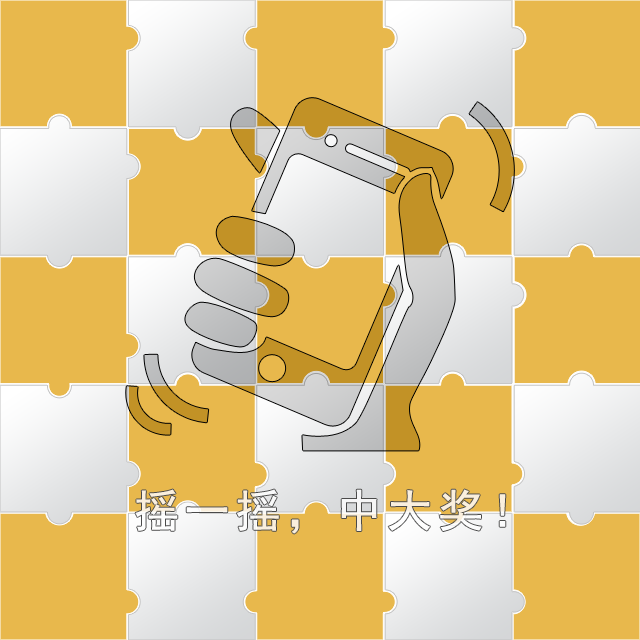
<style>
.page{position:relative;width:640px;height:640px;background:#e8b84c}
.page>*{position:absolute;margin:0}
.t1{font:45px "SimHei";letter-spacing:0.1em;font-weight:bold}
</style>
<div class="page">
<p class="t1" style="left:135px;top:489px;width:371px;height:45px">摇一摇，中大奖！</p>
</div>
